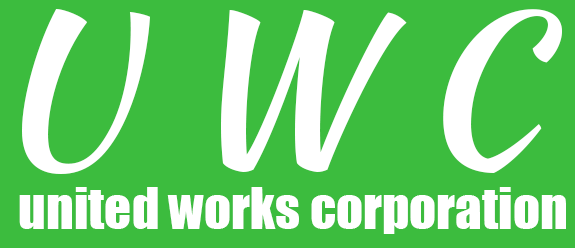
<style>
.page{position:relative;width:575px;height:248px;background:#3cbc3e}
.page>*{position:absolute;margin:0}
.t1{font:200px "KaushanScript-Regular";color:#ffffff}
.t2{font:53px "Impact";color:#ffffff}
</style>
<div class="page">
<p class="t1" style="left:22px;top:9px;width:540px;height:165px">U W C</p>
<p class="t2" style="left:19px;top:187px;width:547px;height:47px">united works corporation</p>
</div>
